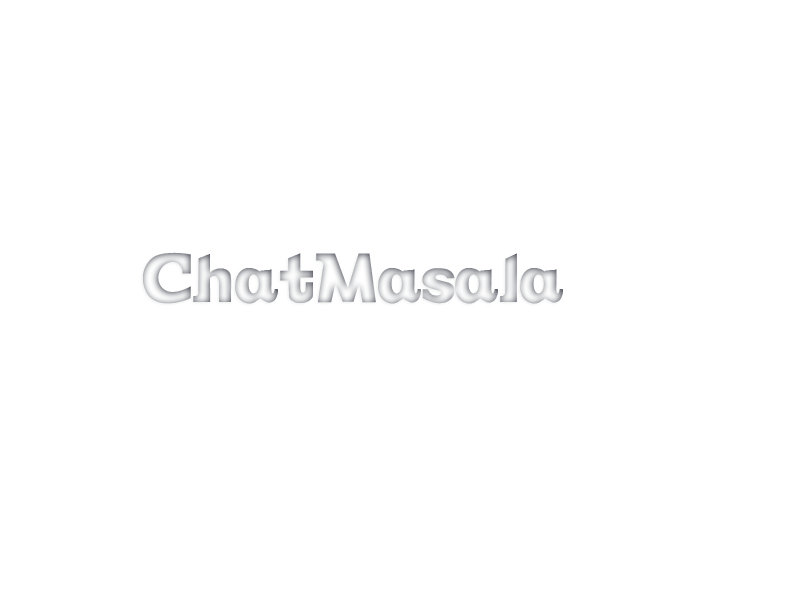
<style>
.page{position:relative;width:800px;height:600px;background:#ffffff}
.page>*{position:absolute;margin:0}
.t1{font:72px "Vintage"}
</style>
<div class="page">
<p class="t1" style="left:143px;top:252px;width:420px;height:52px">ChatMasala</p>
</div>
